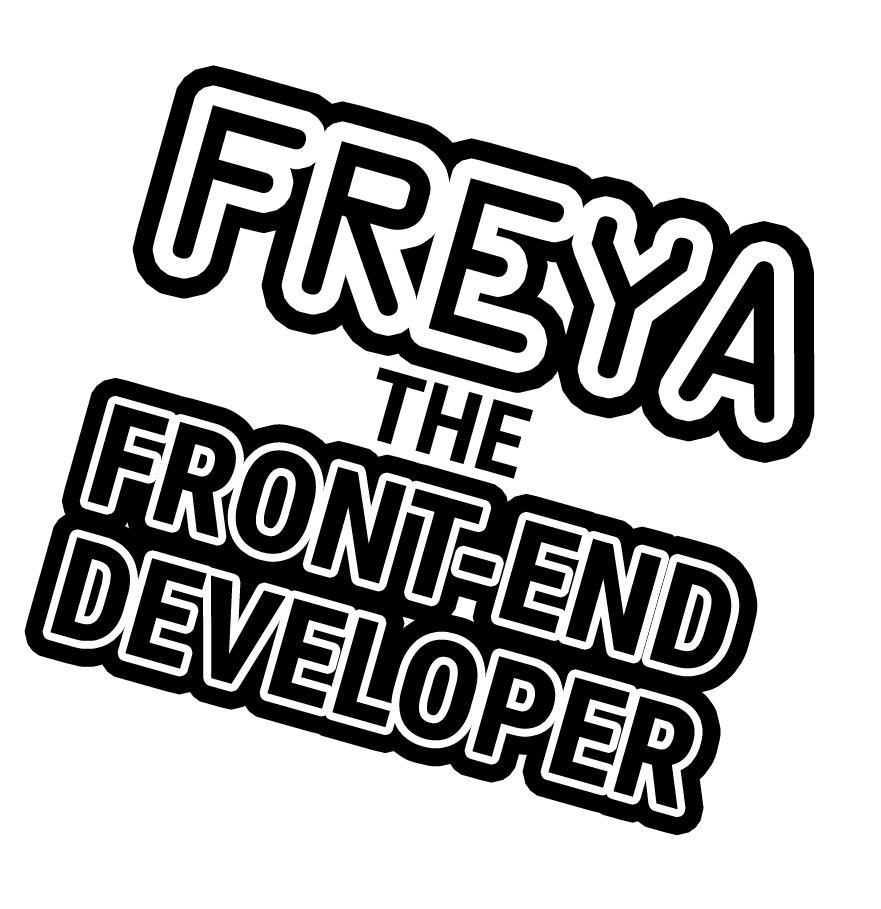
<style>
.page{position:relative;width:881px;height:909px;background:#ffffff}
.page>*{position:absolute;margin:0}
.t1{font:200px "OCRAStd";letter-spacing:-0.05em;color:#000000}
.t2{font:200px "OCRAStd";letter-spacing:-0.1em;color:#000000}
.t3{font:100px "RobotoCondensed-Bold";color:#000000}
.t4{font:142.1px "RobotoCondensed-Bold";color:#000000}
.t5{font:138.3px "RobotoCondensed-Bold";color:#000000}
</style>
<div class="page">
<p class="t1" style="left:172px;top:105px;width:603px;height:318px;rotate:16deg">FRE<span class="t2">YA</span></p>
<p class="t3" style="left:376px;top:367px;width:157px;height:112px;rotate:16deg">THE</p>
<p class="t4" style="left:87px;top:403px;width:645px;height:266px;rotate:16deg">FRONT-END</p>
<p class="t5" style="left:50px;top:537px;width:645px;height:273px;rotate:16deg">DEVELOPER</p>
</div>
